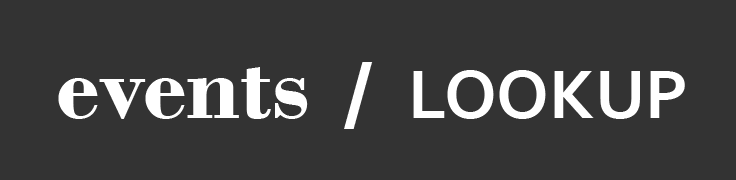
<style>
.page{position:relative;width:736px;height:180px;background:#333333}
.page>*{position:absolute;margin:0}
.t1{font:100px "BodoniMT-Bold";color:#ffffff}
.t2{font:72px "Corbel-Bold";color:#ffffff}
</style>
<div class="page">
<p class="t1" style="left:344px;top:62px;width:29px;height:67px">/</p>
<p class="t1" style="left:58px;top:67px;width:627px;height:52px">events    <span class="t2">LOOKUP</span></p>
</div>
